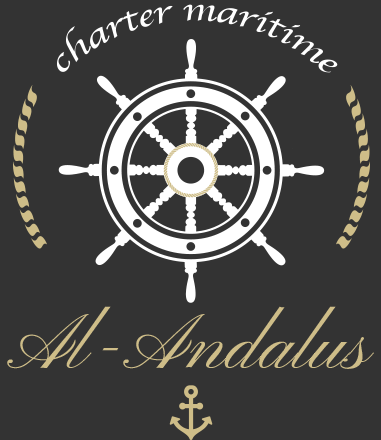
<style>
.page{position:relative;width:381px;height:440px;background:#333333}
.page>*{position:absolute;margin:0}
.t1{font:34.6px/222.2px "Apple-Chancery";color:#ffffff}
.t2{font:78.7px "PinyonScript";color:#cebd88}
</style>
<div class="page">
<p class="t1" style="left:56px;top:4px;width:282px;height:69px;text-align:center">charter maritime</p>
<p class="t2" style="left:7px;top:306px;width:367px;height:63px">Al-Andalus</p>
</div>
